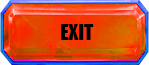
<style>
.page{position:relative;width:149px;height:65px}
.page>*{position:absolute;margin:0}
.t1{font:20px "Impact";color:#000000}
</style>
<div class="page">
<p class="t1" style="left:61px;top:24px;width:33px;height:16px">EXIT</p>
</div>
